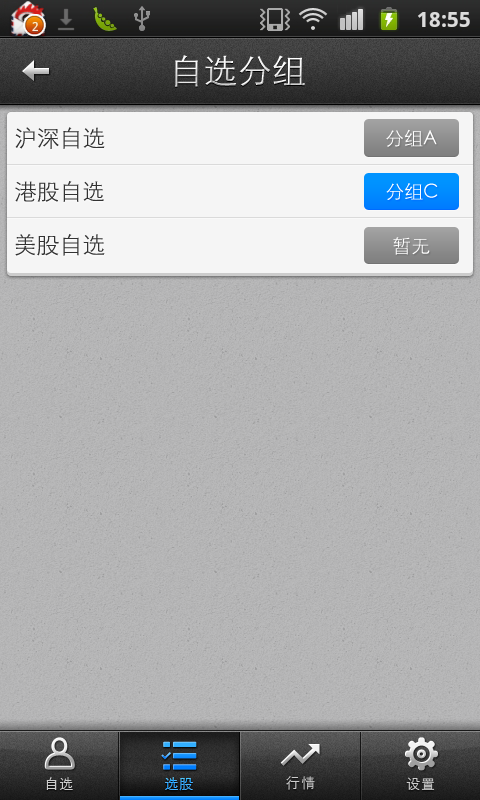
<style>
.page{position:relative;width:480px;height:800px}
.page>*{position:absolute;margin:0}
.t1{font:34px "STXihei";letter-spacing:0.005em;color:#ffffff}
.t2{font:23px "STXihei";color:#333333}
.t3{font:19px "STXihei";color:#ffffff}
.t4{font:22.6px "STXihei";color:#333333}
.t5{font:14px "STXihei";letter-spacing:0.05em;color:#cccccc}
.t6{font:14px "STXihei";letter-spacing:0.05em}
.t7{font:14px "STXihei";letter-spacing:0.1em;color:#cccccc}
</style>
<div class="page">
<p class="t1" style="left:175px;top:55px;width:130px;height:32px">自选分组</p>
<p class="t2" style="left:15px;top:127px;width:90px;height:22px">沪深自选</p>
<p class="t3" style="left:386px;top:129px;width:51px;height:18px">分组A</p>
<p class="t4" style="left:15px;top:181px;width:89px;height:21px">港股自选</p>
<p class="t3" style="left:386px;top:183px;width:52px;height:17px">分组C</p>
<p class="t2" style="left:15px;top:234px;width:90px;height:22px">美股自选</p>
<p class="t3" style="left:393px;top:237px;width:37px;height:18px">暂无</p>
<p class="t5" style="left:46px;top:777px;width:27px;height:13px">自选</p>
<p class="t6" style="left:165px;top:777px;width:28px;height:14px">选股</p>
<p class="t6" style="left:165px;top:777px;width:28px;height:14px">选股</p>
<p class="t7" style="left:286px;top:776px;width:29px;height:14px">行情</p>
<p class="t5" style="left:406px;top:777px;width:29px;height:13px">设置</p>
</div>
